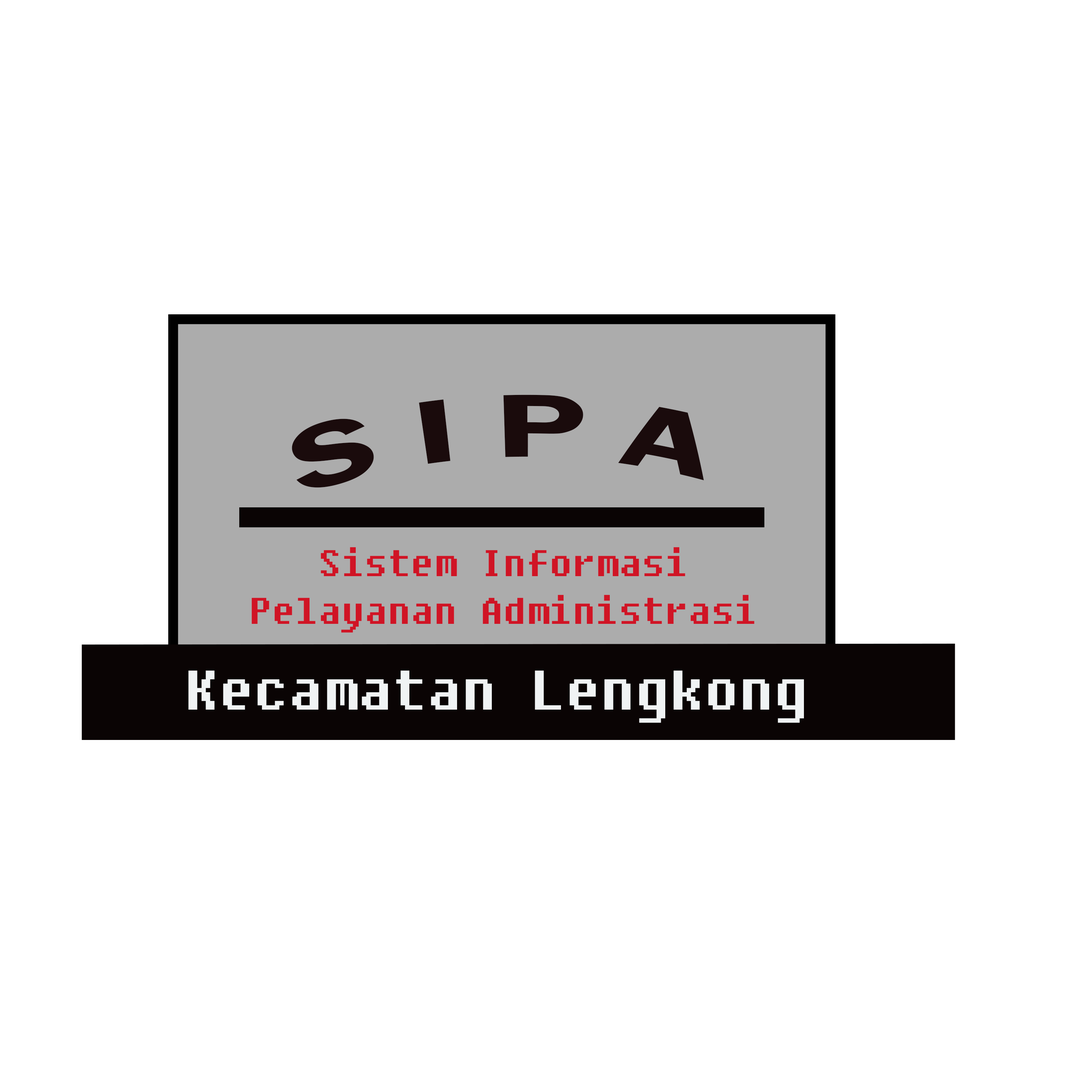
<style>
.page{position:relative;width:1092px;height:1092px;background:#ffffff}
.page>*{position:absolute;margin:0}
.t1{font:92.4px "FranklinGothic-Demi";color:#1a0b0c}
.t2{font:55.5px "FranklinGothic-Demi";color:#1a0b0c}
.t3{font:37px "Fixedsys";color:#d01425}
.t4{font:37px "FranklinGothic-Demi";color:#1a0b0c}
.t5{font:55.5px "Fixedsys";color:#f0f3f4}
.t6{font:55.5px "BernardMT-Condensed";color:#f0f3f4}
</style>
<div class="page">
<p class="t1" style="left:292px;top:395px;width:412px;height:93px"><span class="t2"><br><br></span>S I P A</p>
<p class="t3" style="left:251px;top:547px;width:503px;height:86px;text-align:center"><span class="t4"><br><br><br><br><br></span>Sistem Informasi <br>Pelayanan Administrasi</p>
<p class="t5" style="left:188px;top:670px;width:616px;height:53px"><span class="t6">              <br></span>Kecamatan Lengkong</p>
</div>
